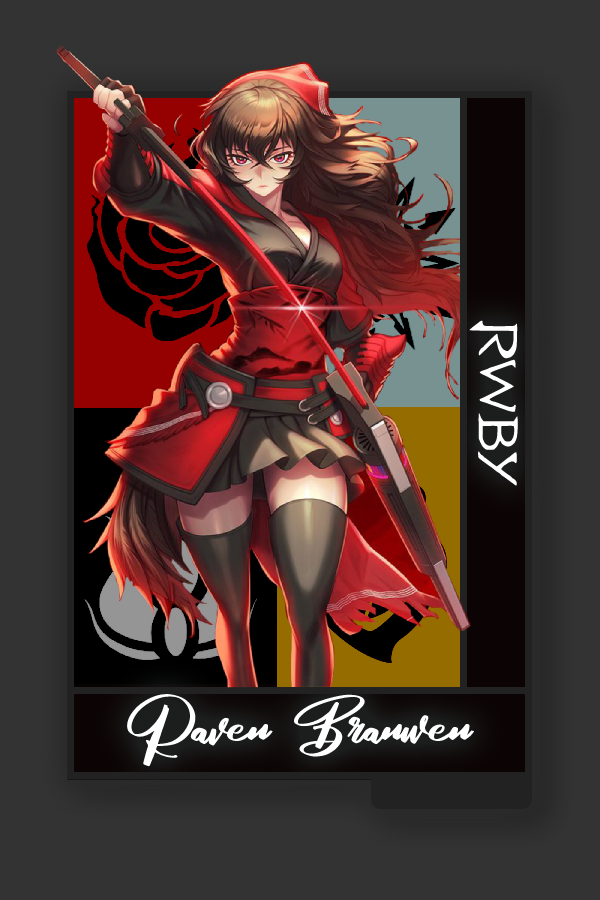
<style>
.page{position:relative;width:600px;height:900px;background:#333333}
.page>*{position:absolute;margin:0}
.t1{font:61.3px "RWBY_Style";color:#ffffff;scale:1.25 1}
.t2{font:75px "RosegaFREE";color:#ffffff}
</style>
<div class="page">
<p class="t1" style="left:469px;top:320px;width:49px;height:166px;rotate:90deg">RWBY</p>
<p class="t2" style="left:126px;top:693px;width:349px;height:74px">Raven Branwen</p>
</div>
